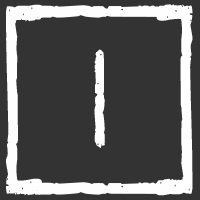
<style>
.page{position:relative;width:200px;height:200px;background:#333333}
.page>*{position:absolute;margin:0}
.t1{font:100px "KGTenThousandReasonsAlt";color:#fefefe}
</style>
<div class="page">
<p class="t1" style="left:94px;top:49px;width:11px;height:99px">1</p>
</div>
